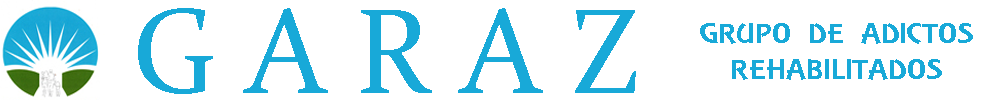
<style>
.page{position:relative;width:1000px;height:100px;background:#ffffff}
.page>*{position:absolute;margin:0}
.t1{font:120px "Constantia";color:#18a9d8}
.t2{font:29.9px "ARESSENCE";color:#18a9d8;scale:1.25 1}
</style>
<div class="page">
<p class="t1" style="left:138px;top:8px;width:498px;height:86px">G A R A Z</p>
<p class="t2" style="left:700px;top:23px;width:273px;height:57px;text-align:center">GRUPO DE ADICTOS<br>REHABILITADOS</p>
</div>
